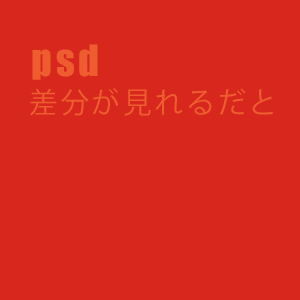
<style>
.page{position:relative;width:300px;height:300px;background:#d8271c}
.page>*{position:absolute;margin:0}
.t1{font:40px "Impact";letter-spacing:0.1em;color:#ee5c30}
.t2{font:28.7px "KozGoPr6N-Regular";letter-spacing:0.1em;color:#ee5c30}
</style>
<div class="page">
<p class="t1" style="left:32px;top:44px;width:66px;height:36px">psd</p>
<p class="t2" style="left:30px;top:88px;width:243px;height:28px">差分が見れるだと</p>
</div>
